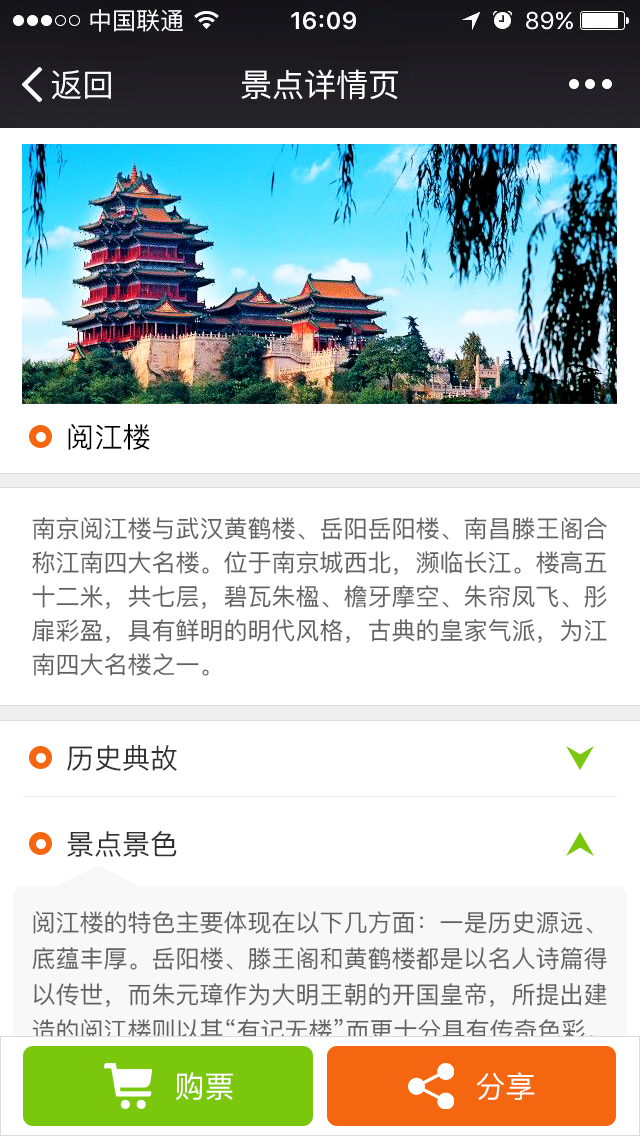
<style>
.page{position:relative;width:640px;height:1136px;background:#ffffff}
.page>*{position:absolute;margin:0}
.t1{font:32px "PingFang-SC-Medium";color:#ffffff}
.t2{font:28px "PingFang-SC-Medium";letter-spacing:0.01em;color:#000000}
.t3{font:24px/34px "PingFang-SC-Medium";color:#626262}
.t4{font:28px "PingFang-SC-Medium";color:#313131}
.t5{font:30px "PingFang-SC-Medium";letter-spacing:0.01em;color:#ffffff}
</style>
<div class="page">
<p class="t1" style="left:241px;top:69px;width:157px;height:31px">景点详情页</p>
<p class="t2" style="left:68px;top:424px;width:82px;height:26px">阅江楼</p>
<p class="t3" style="left:32px;top:517px;width:575px;height:159px">南京阅江楼与武汉黄鹤楼、岳阳岳阳楼、南昌滕王阁合称江南四大名楼。位于南京城西北，濒临长江。楼高五十二米，共七层，碧瓦朱楹、檐牙摩空、朱帘凤飞、彤扉彩盈，具有鲜明的明代风格，古典的皇家气派，为江南四大名楼之一。</p>
<p class="t4" style="left:67px;top:745px;width:110px;height:26px">历史典故</p>
<p class="t4" style="left:67px;top:831px;width:110px;height:26px">景点景色</p>
<p class="t5" style="left:176px;top:1072px;width:57px;height:28px">购票</p>
<p class="t5" style="left:477px;top:1072px;width:58px;height:28px">分享</p>
</div>
